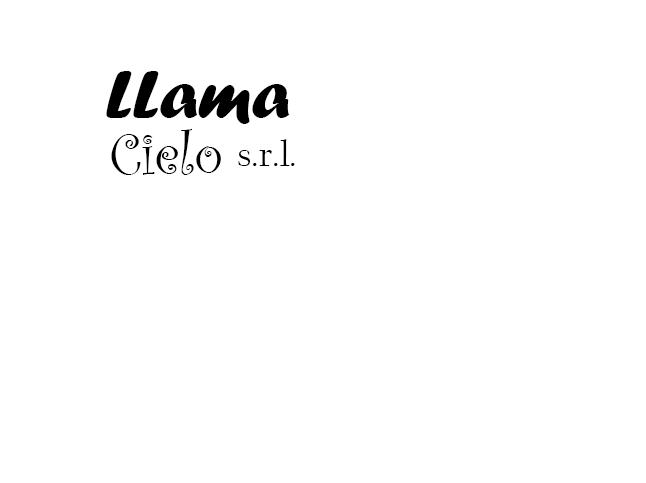
<style>
.page{position:relative;width:646px;height:483px;background:#ffffff}
.page>*{position:absolute;margin:0}
.t1{font:70px "ForteMT";color:#000000}
.t2{font:60px "CurlzMT";color:#000000}
.t3{font:36px "CalifornianFB-Reg";color:#000000}
</style>
<div class="page">
<p class="t1" style="left:106px;top:71px;width:184px;height:53px">LLama</p>
<p class="t2" style="left:111px;top:129px;width:110px;height:46px">Cielo</p>
<p class="t3" style="left:238px;top:139px;width:57px;height:27px">s.r.l.</p>
</div>
